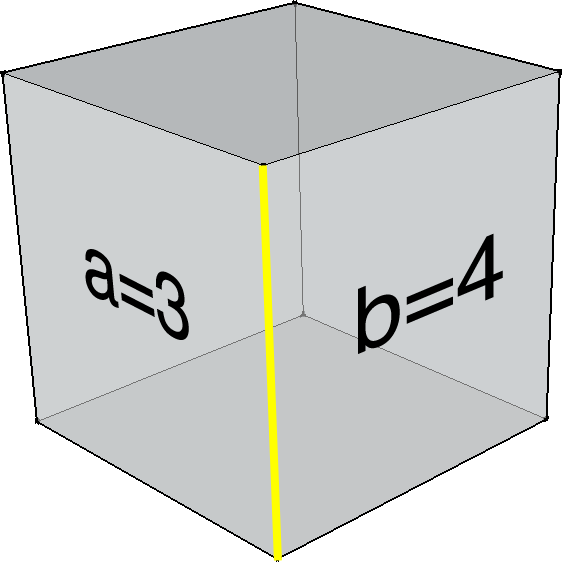
<style>
.page{position:relative;width:563px;height:562px;background:#ffffff}
.page>*{position:absolute;margin:0}
.t1{font:90px "Helvetica";color:#000000;scale:1.08 1}
.t2{font:90px "Helvetica";color:#000000;scale:0.8 1}
</style>
<div class="page">
<p class="t1" style="left:358px;top:233px;width:145px;height:121px;rotate:-23deg">b=4</p>
<p class="t2" style="left:85px;top:249px;width:104px;height:91px;rotate:27deg">a=3</p>
</div>
